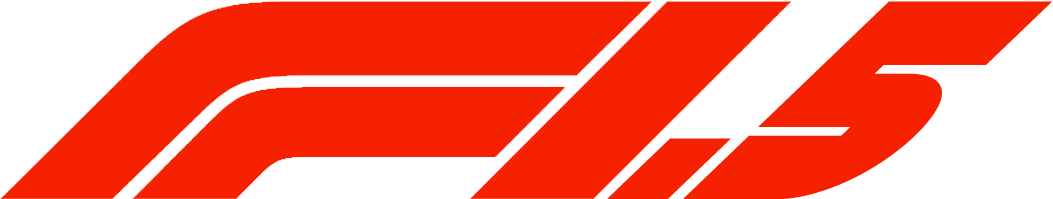
<style>
.page{position:relative;width:1053px;height:199px;background:#f62100}
.page>*{position:absolute;margin:0}
.t1{font:380px "Formula1-Display-Black";letter-spacing:0.02em;color:#f62100;scale:0.69 1}
</style>
<div class="page">
<p class="t1" style="left:607px;top:1px;width:445px;height:198px">.5</p>
</div>
